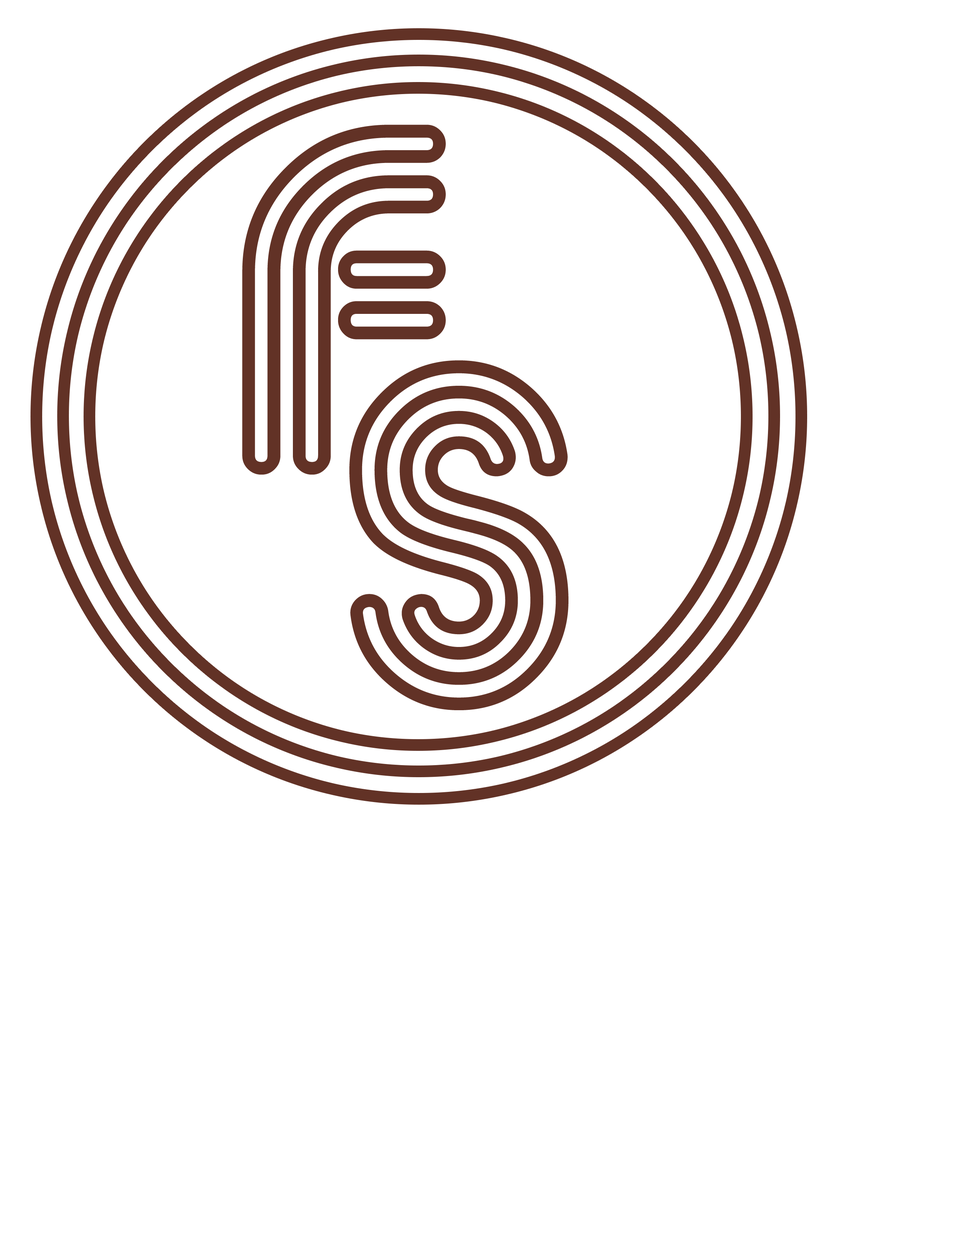
<style>
.page{position:relative;width:960px;height:1242px;background:#ffffff}
.page>*{position:absolute;margin:0}
.t1{font:486.4px "MACCOSDemo";color:#623226}
.t2{font:486.4px "MACCOSDemo";color:#4b2a10}
</style>
<div class="page">
<p class="t1" style="left:242px;top:125px;width:204px;height:350px">f</p>
<p class="t1" style="left:349px;top:360px;width:219px;height:350px">s<span class="t2">s</span></p>
</div>
